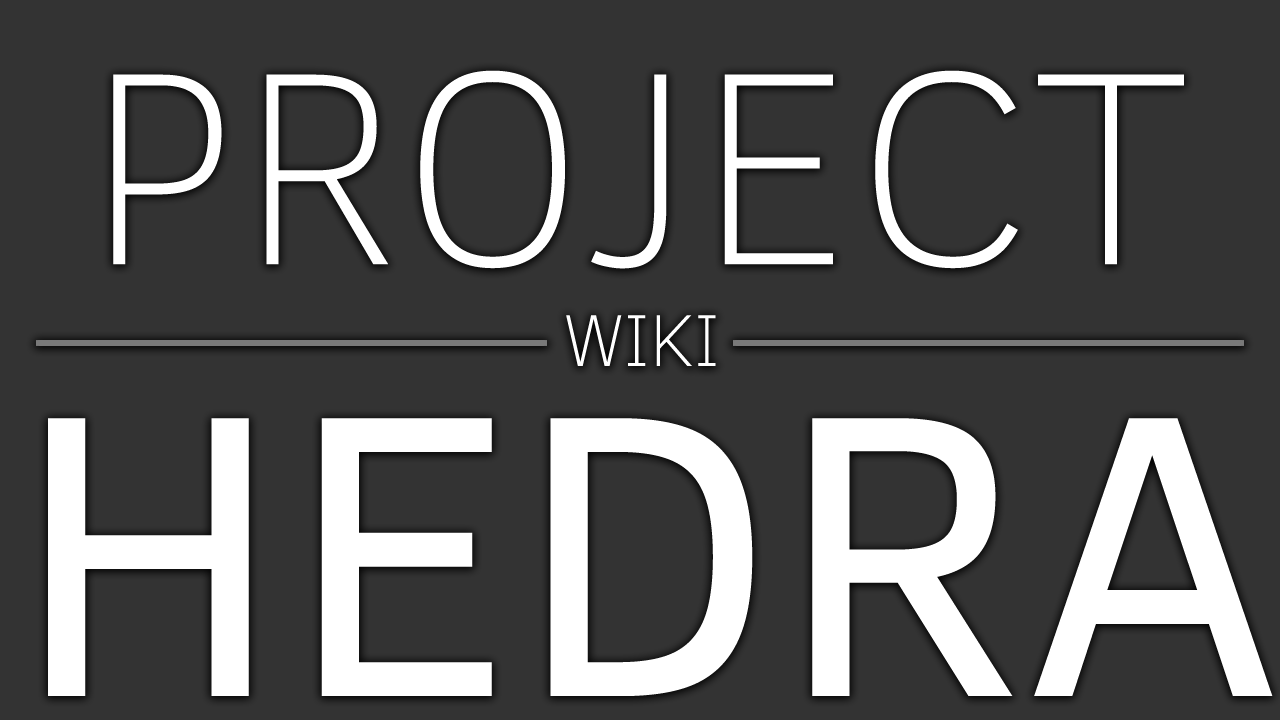
<style>
.page{position:relative;width:1280px;height:720px;background:#333333}
.page>*{position:absolute;margin:0}
.t1{font:280px "ClearSans-Thin";color:#ffffff}
.t2{font:75px "ClearSans-Thin";color:#ffffff}
.t3{font:410.9px "ClearSans";color:#ffffff}
</style>
<div class="page">
<p class="t1" style="left:113px;top:70px;width:1071px;height:199px">PROJECT</p>
<p class="t2" style="left:566px;top:315px;width:150px;height:51px">WIKI</p>
<p class="t3" style="left:48px;top:418px;width:1225px;height:278px">HEDRA</p>
</div>
